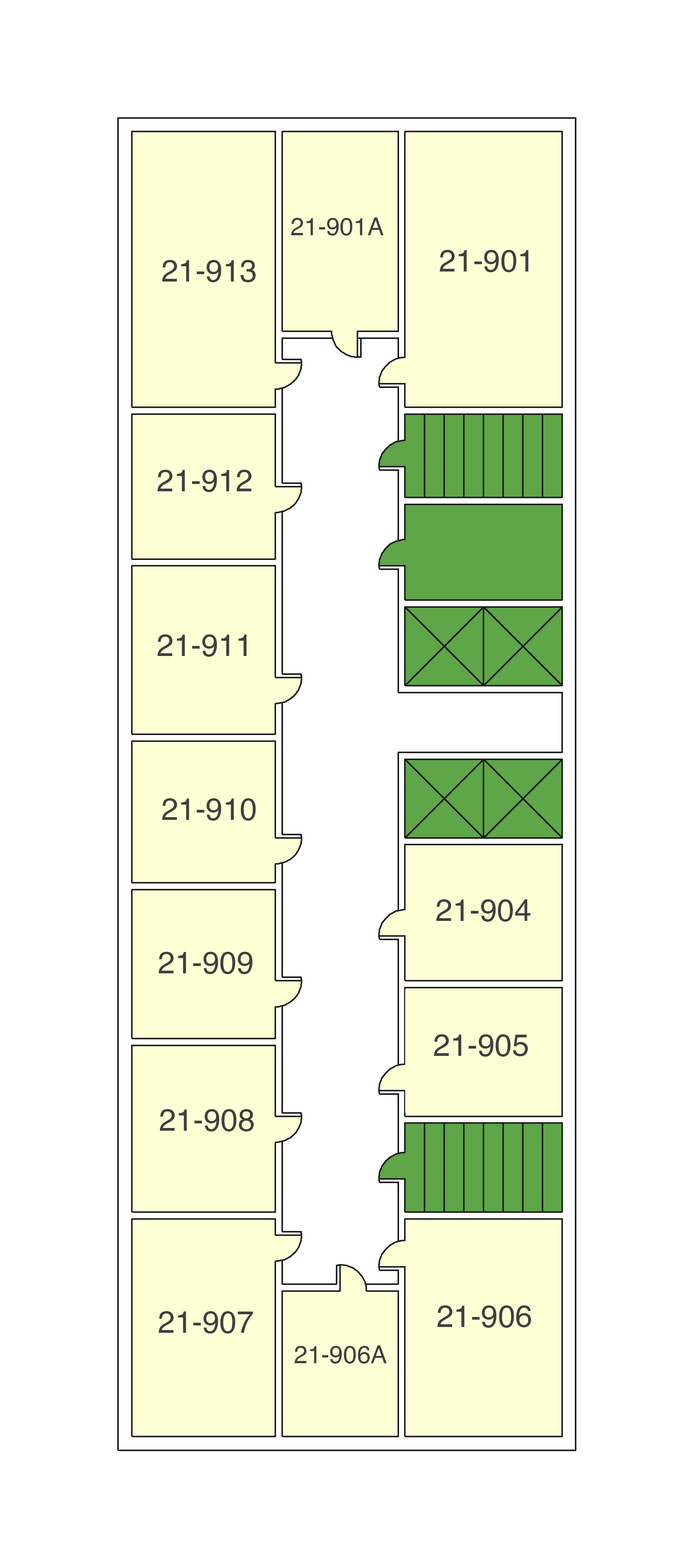
<style>
.page{position:relative;width:694px;height:1568px;background:#ffffff}
.page>*{position:absolute;margin:0}
.t1{font:24.7px "Helvetica";color:#3f3f3f}
.t2{font:30.8px "Helvetica";color:#3f3f3f}
</style>
<div class="page">
<p class="t1" style="left:291px;top:217px;width:93px;height:19px">21-901A</p>
<p class="t2" style="left:440px;top:250px;width:89px;height:22px">21-901</p>
<p class="t2" style="left:162px;top:260px;width:94px;height:22px">21-913</p>
<p class="t2" style="left:157px;top:470px;width:95px;height:22px">21-912</p>
<p class="t2" style="left:157px;top:634px;width:90px;height:23px">21-911</p>
<p class="t2" style="left:162px;top:798px;width:94px;height:23px">21-910</p>
<p class="t2" style="left:436px;top:899px;width:95px;height:23px">21-904</p>
<p class="t2" style="left:158px;top:952px;width:95px;height:22px">21-909</p>
<p class="t2" style="left:434px;top:1034px;width:94px;height:23px">21-905</p>
<p class="t2" style="left:160px;top:1109px;width:94px;height:22px">21-908</p>
<p class="t2" style="left:158px;top:1311px;width:95px;height:23px">21-907</p>
<p class="t2" style="left:437px;top:1305px;width:94px;height:23px">21-906</p>
<p class="t1" style="left:295px;top:1345px;width:92px;height:19px">21-906A</p>
</div>
